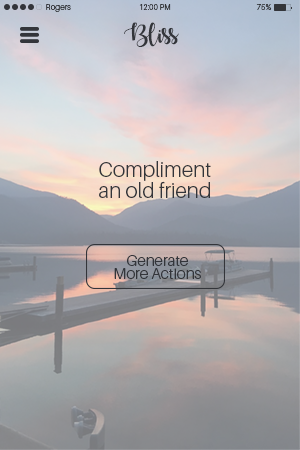
<style>
.page{position:relative;width:300px;height:450px}
.page>*{position:absolute;margin:0}
.t1{font:8.3px "Aileron-Light";color:#33353a}
.t2{font:7.8px "Aileron-Light";color:#33353a}
.t3{font:7.9px "Aileron-Light";color:#33353a}
.t4{font:18.9px "AutumninNovember";color:#33353a}
.t5{font:21.1px/21.6px "Aileron-Light";color:#33353a}
.t6{font:15.5px/12.9px "Aileron-Light";color:#33353a}
</style>
<div class="page">
<p class="t1" style="left:46px;top:4px;width:25px;height:8px">Rogers</p>
<p class="t2" style="left:139px;top:4px;width:32px;height:6px">12:00 PM</p>
<p class="t3" style="left:256px;top:4px;width:16px;height:6px">75%</p>
<p class="t4" style="left:124px;top:22px;width:55px;height:25px">Bliss</p>
<p class="t5" style="left:99px;top:161px;width:112px;height:37px;text-align:center">Compliment<br>an old friend</p>
<p class="t6" style="left:114px;top:255px;width:87px;height:24px;text-align:center">Generate<br>More Actions</p>
</div>
